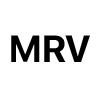
<style>
.page{position:relative;width:100px;height:100px;background:#ffffff}
.page>*{position:absolute;margin:0}
.t1{font:37.5px "SFProDisplay-Bold";color:#000000}
</style>
<div class="page">
<p class="t1" style="left:11px;top:35px;width:79px;height:27px">MRV</p>
</div>
